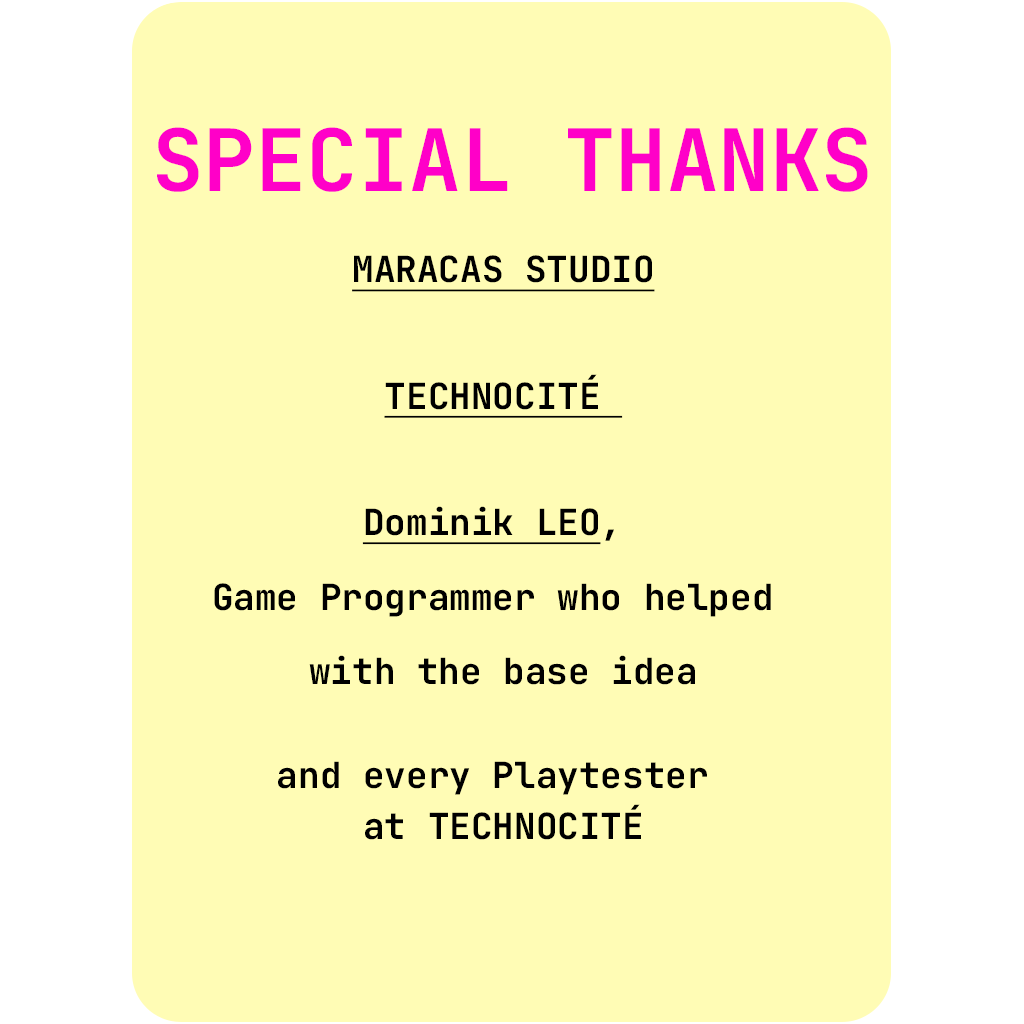
<style>
.page{position:relative;width:1024px;height:1024px;background:#fffcb5}
.page>*{position:absolute;margin:0}
.t1{font:85.8px "JetBrainsMonoRoman-Bold";color:#ff00c8}
.t2{font:36px/74.7px "JetBrainsMonoRoman-Bold";color:#000000}
.t3{font:36px/74.7px "JetBrainsMonoRoman-Bold";color:#000000;text-decoration:underline}
.t4{font:36px/51.7px "JetBrainsMonoRoman-Bold";color:#000000;text-decoration:underline}
.t5{font:36px/51.7px "JetBrainsMonoRoman-Bold";color:#000000}
</style>
<div class="page">
<p class="t1" style="left:157px;top:127px;width:711px;height:65px">SPECIAL THANKS</p>
<p class="t2" style="left:214px;top:255px;width:557px;height:585px;text-align:center"><span class="t3">MARACAS STUDIO<br></span><br><span class="t4">TECHNOCITÉ <br><br>Dominik LEO</span><span class="t5">, <br></span>Game Programmer who helped <br>with the base idea<br><span class="t5"><br>and every Playtester <br>at TECHNOCITÉ</span></p>
</div>
